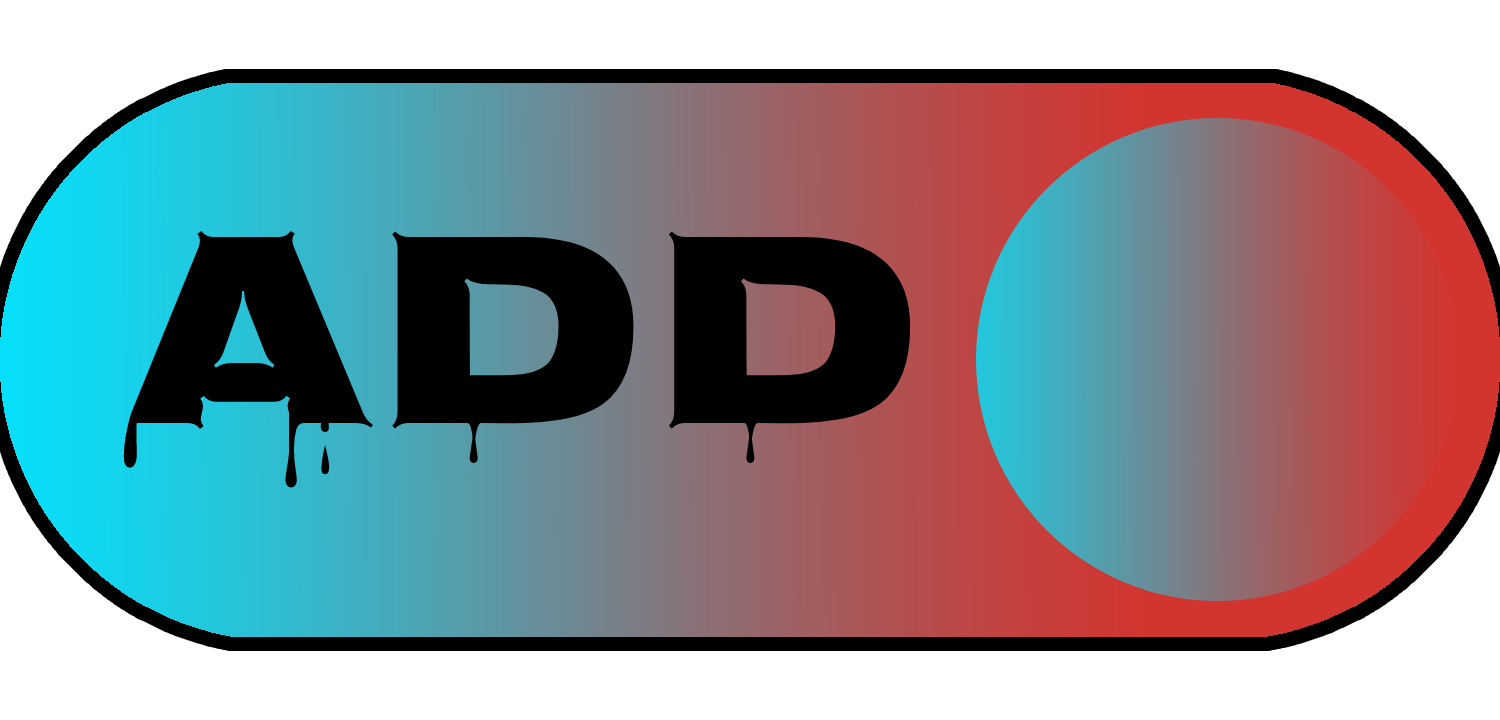
<style>
.page{position:relative;width:1500px;height:720px;background:#ffffff}
.page>*{position:absolute;margin:0}
.t1{font:285.9px "Nosifer-Regular";color:#000000}
</style>
<div class="page">
<p class="t1" style="left:123px;top:231px;width:788px;height:257px">Add</p>
</div>
